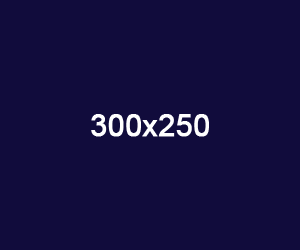
<style>
.page{position:relative;width:300px;height:250px;background:#110c3c}
.page>*{position:absolute;margin:0}
.t1{font:30px "ArialMT";color:#ffffff;font-weight:bold}
</style>
<div class="page">
<p class="t1" style="left:91px;top:114px;width:118px;height:23px">300x250</p>
</div>
